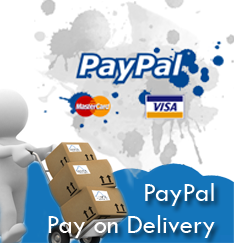
<style>
.page{position:relative;width:234px;height:243px;background:#ffffff}
.page>*{position:absolute;margin:0}
.t1{font:27px "TwCenMT-Regular";color:#ffffff}
</style>
<div class="page">
<p class="t1" style="left:48px;top:183px;width:167px;height:55px;text-align:right">PayPal<br>Pay on Delivery</p>
</div>
